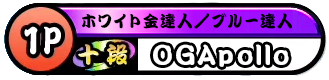
<style>
.page{position:relative;width:329px;height:80px;background:#ffffff}
.page>*{position:absolute;margin:0}
.t1{font:16px "OedKtrStd-E";letter-spacing:0.1em;color:#000000;scale:0.97 1}
.t2{font:24px "OedKtrStd-E";letter-spacing:0.07em;color:#ffffff}
</style>
<div class="page">
<p class="t1" style="left:82px;top:13px;width:210px;height:16px">ホワイト金達人／ブルー達人</p>
<p class="t2" style="left:153px;top:44px;width:136px;height:23px">OGApollo</p>
</div>
